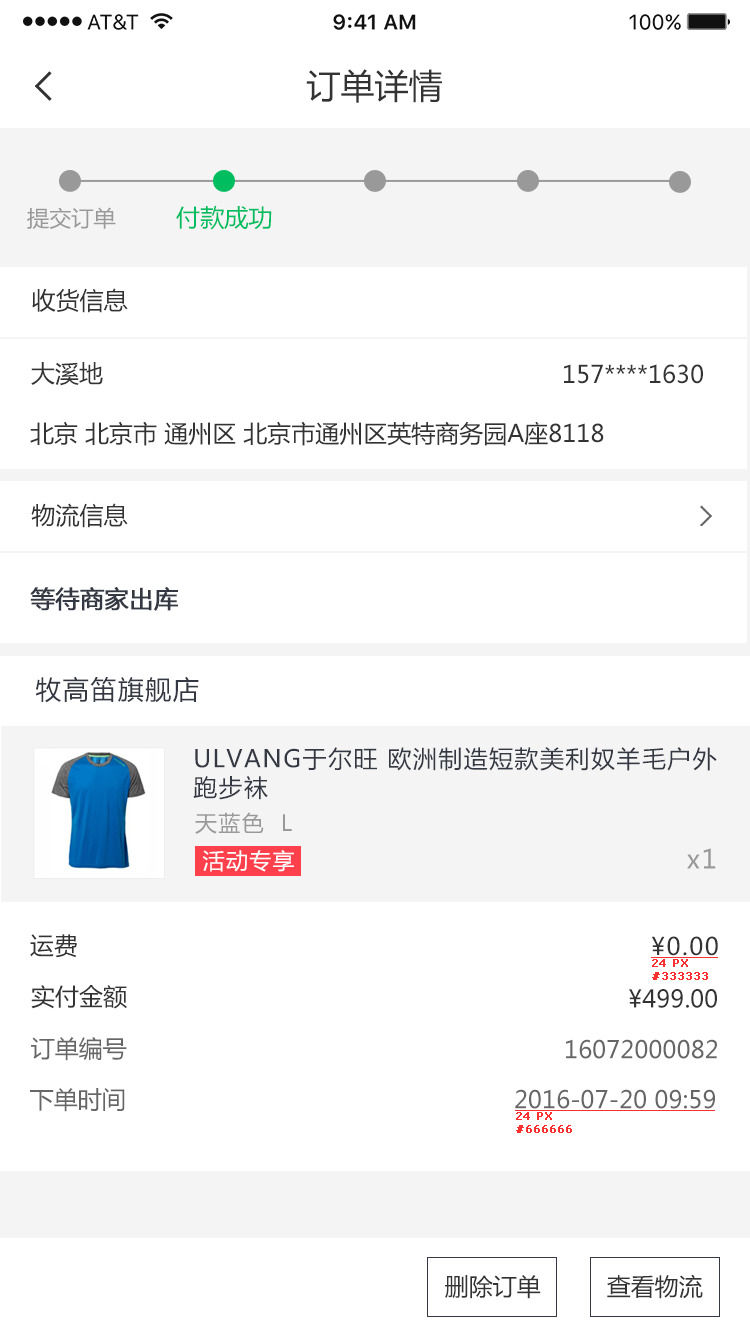
<style>
.page{position:relative;width:750px;height:1334px;background:#ffffff}
.page>*{position:absolute;margin:0}
.t1{font:34px "MicrosoftYaHei";color:#333333}
.t2{font:22px "MicrosoftYaHei";color:#999999}
.t3{font:24px "MicrosoftYaHei";color:#00be60}
.t4{font:24px "MicrosoftYaHei";color:#333333}
.t5{font:24px "MicrosoftYaHei";color:#343843;font-weight:bold}
.t6{font:26px "MicrosoftYaHei";letter-spacing:0.06em;color:#343843}
.t7{font:24px "MicrosoftYaHei";letter-spacing:0.06em;color:#343843}
.t8{font:22px "MicrosoftYaHei";letter-spacing:0.06em;color:#999999}
.t9{font:22px "MicrosoftYaHei";letter-spacing:0.06em;color:#ffffff}
.t10{font:26px "MicrosoftYaHei";letter-spacing:0.06em;color:#999999}
.t11{font:24px "MicrosoftYaHei";letter-spacing:0.06em;color:#333333}
.t12{font:11px "Verdana";color:#f83030;font-weight:bold}
.t13{font:24px "MicrosoftYaHei";color:#666666}
</style>
<div class="page">
<p class="t1" style="left:306px;top:69px;width:136px;height:34px">订单详情</p>
<p class="t2" style="left:27px;top:207px;width:89px;height:22px">提交订单</p>
<p class="t3" style="left:176px;top:205px;width:96px;height:25px">付款成功</p>
<p class="t4" style="left:32px;top:288px;width:96px;height:25px">收货信息</p>
<p class="t4" style="left:31px;top:362px;width:72px;height:24px">大溪地</p>
<p class="t4" style="left:564px;top:364px;width:139px;height:20px">157****1630</p>
<p class="t4" style="left:30px;top:421px;width:574px;height:25px">北京 北京市 通州区 北京市通州区英特商务园A座8118</p>
<p class="t4" style="left:31px;top:503px;width:97px;height:25px">物流信息</p>
<p class="t5" style="left:30px;top:587px;width:148px;height:24px">等待商家出库</p>
<p class="t6" style="left:36px;top:676px;width:163px;height:27px">牧高笛旗舰店</p>
<p class="t7" style="left:193px;top:747px;width:524px;height:53px">ULVANG于尔旺 欧洲制造短款美利奴羊毛户外跑步袜</p>
<p class="t8" style="left:195px;top:812px;width:97px;height:22px">天蓝色  L</p>
<p class="t9" style="left:202px;top:850px;width:92px;height:22px">活动专享</p>
<p class="t10" style="left:687px;top:848px;width:29px;height:21px">x1</p>
<p class="t4" style="left:30px;top:934px;width:47px;height:24px">运费</p>
<p class="t11" style="left:651px;top:936px;width:67px;height:20px">¥0.00</p>
<p class="t12" style="left:652px;top:959px;width:56px;height:21px">24 PX<br>#333333</p>
<p class="t4" style="left:31px;top:985px;width:96px;height:24px">实付金额</p>
<p class="t4" style="left:629px;top:989px;width:88px;height:19px">¥499.00</p>
<p class="t13" style="left:31px;top:1037px;width:96px;height:24px">订单编号</p>
<p class="t13" style="left:566px;top:1039px;width:151px;height:20px">16072000082</p>
<p class="t13" style="left:30px;top:1088px;width:95px;height:24px">下单时间</p>
<p class="t13" style="left:515px;top:1089px;width:200px;height:20px">2016-07-20 09:59</p>
<p class="t12" style="left:516px;top:1112px;width:56px;height:21px">24 PX<br>#666666</p>
<p class="t4" style="left:445px;top:1275px;width:96px;height:24px">删除订单</p>
<p class="t4" style="left:607px;top:1274px;width:96px;height:25px">查看物流</p>
</div>
